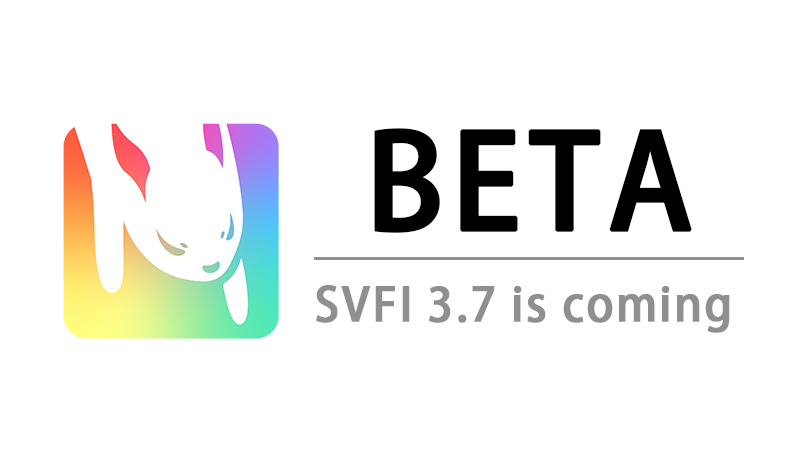
<style>
.page{position:relative;width:800px;height:450px;background:#ffffff}
.page>*{position:absolute;margin:0}
.t1{font:129px "AdobeHeitiStd-Regular";letter-spacing:0.04em;color:#000000;font-weight:bold}
.t2{font:46.3px "AdobeHeitiStd-Regular";letter-spacing:0.04em;color:#8f8f8f;font-weight:bold}
</style>
<div class="page">
<p class="t1" style="left:374px;top:128px;width:318px;height:105px">BETA</p>
<p class="t2" style="left:316px;top:285px;width:414px;height:48px">SVFI 3.7 is coming</p>
</div>
